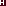
<style>
.page{position:relative;width:6px;height:6px;background:#450414}
.page>*{position:absolute;margin:0}
.t1{font:7.5px "04b03";color:#ffffff}
</style>
<div class="page">
<p class="t1" style="left:0px;top:0px;width:4px;height:5px">H</p>
</div>
